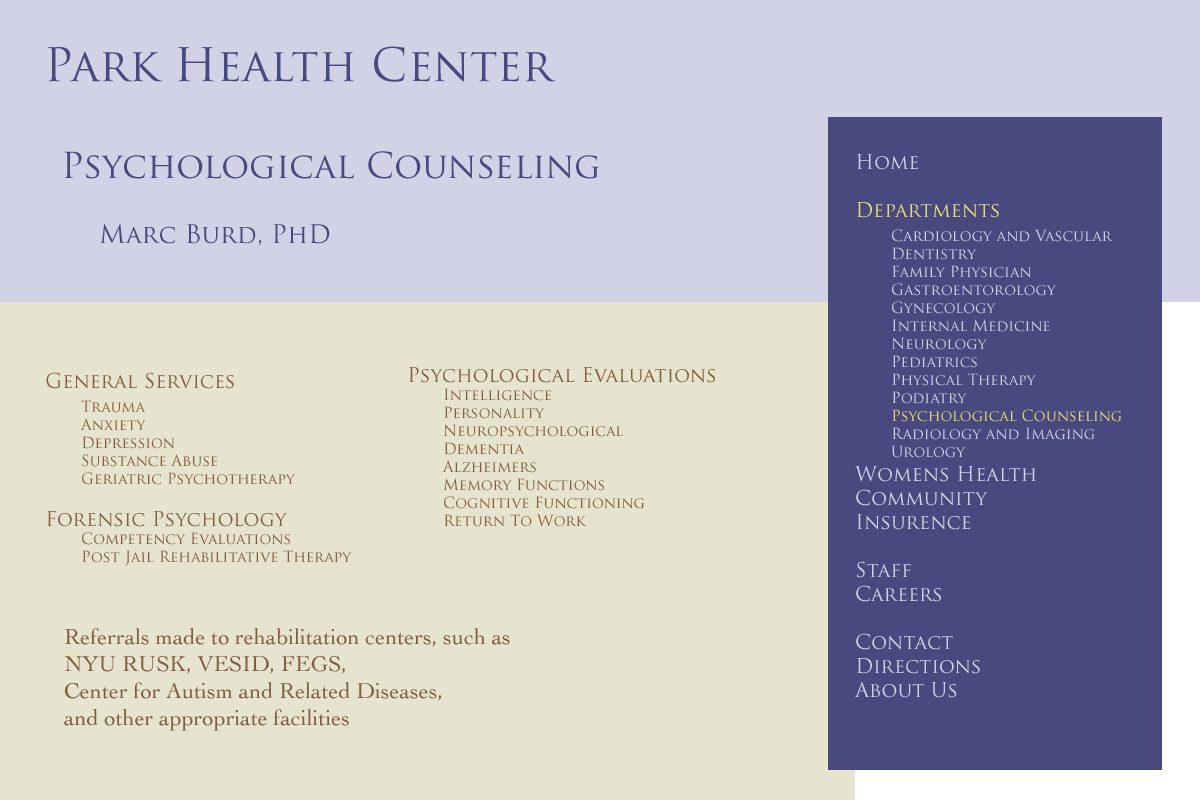
<style>
.page{position:relative;width:1200px;height:800px;background:#e6e3cf}
.page>*{position:absolute;margin:0}
.t1{font:45px "TrajanPro-Regular";color:#494980}
.t2{font:35px "TrajanPro-Regular";color:#494980}
.t3{font:15px "TrajanPro-Regular";color:#d2d2e6}
.t4{font:20px "TrajanPro-Regular";color:#d2d2e6}
.t5{font:20px "TrajanPro-Regular";color:#e6e073}
.t6{font:15px "TrajanPro-Regular";color:#e6e073}
.t7{font:25px "TrajanPro-Regular";color:#494980}
.t8{font:15px "TrajanPro-Regular";color:#805d40}
.t9{font:20px "TrajanPro-Regular";color:#805d40}
.t10{font:22.5px "Cochin";color:#805d40}
</style>
<div class="page">
<p class="t1" style="left:48px;top:46px;width:508px;height:36px">Park Health Center</p>
<p class="t2" style="left:64px;top:151px;width:535px;height:28px">Psychological Counseling</p>
<p class="t3" style="left:854px;top:154px;width:268px;height:544px"><span class="t4">Home<br><br></span><span class="t5">Departments<br> </span> Cardiology and Vascular<br> Dentistry<br> Family Physician<br> Gastroentorology<br> Gynecology<br> Internal Medicine<br> Neurology<br> Pediatrics<br> Physical Therapy<br> Podiatry<br><span class="t6"> Psychological Counseling<br> </span>Radiology and Imaging<br> Urology<br><span class="t4">Womens Health<br>Community<br>Insurence<br><br>Staff<br>Careers<br><br>Contact<br>Directions<br>About Us</span></p>
<p class="t7" style="left:100px;top:224px;width:230px;height:22px">Marc Burd, PhD</p>
<p class="t8" style="left:409px;top:366px;width:306px;height:161px"><span class="t9">Psychological Evaluations<br></span> Intelligence<br> Personality<br> Neuropsychological<br> Dementia<br> Alzheimers<br> Memory Functions<br> Cognitive Functioning<br> Return To Work</p>
<p class="t8" style="left:46px;top:372px;width:306px;height:194px"><span class="t9">General Services<br> </span>Trauma<br> Anxiety<br> Depression<br> Substance Abuse<br> Geriatric Psychotherapy<br><br><span class="t9">Forensic Psychology<br></span> Competency Evaluations<br> Post Jail Rehabilitative Therapy</p>
<p class="t10" style="left:64px;top:628px;width:446px;height:103px">Referrals made to rehabilitation centers, such as<br>NYU RUSK, VESID, FEGS,<br>Center for Autism and Related Diseases,<br>and other appropriate facilities</p>
</div>
